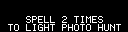
<style>
.page{position:relative;width:128px;height:32px;background:#000000}
.page>*{position:absolute;margin:0}
.t1{font:8px "Terminal";color:#ffffff}
</style>
<div class="page">
<p class="t1" style="left:26px;top:16px;width:77px;height:7px">SPELL 2 TIMES</p>
<p class="t1" style="left:8px;top:24px;width:113px;height:7px">TO LIGHT PHOTO HUNT</p>
</div>
